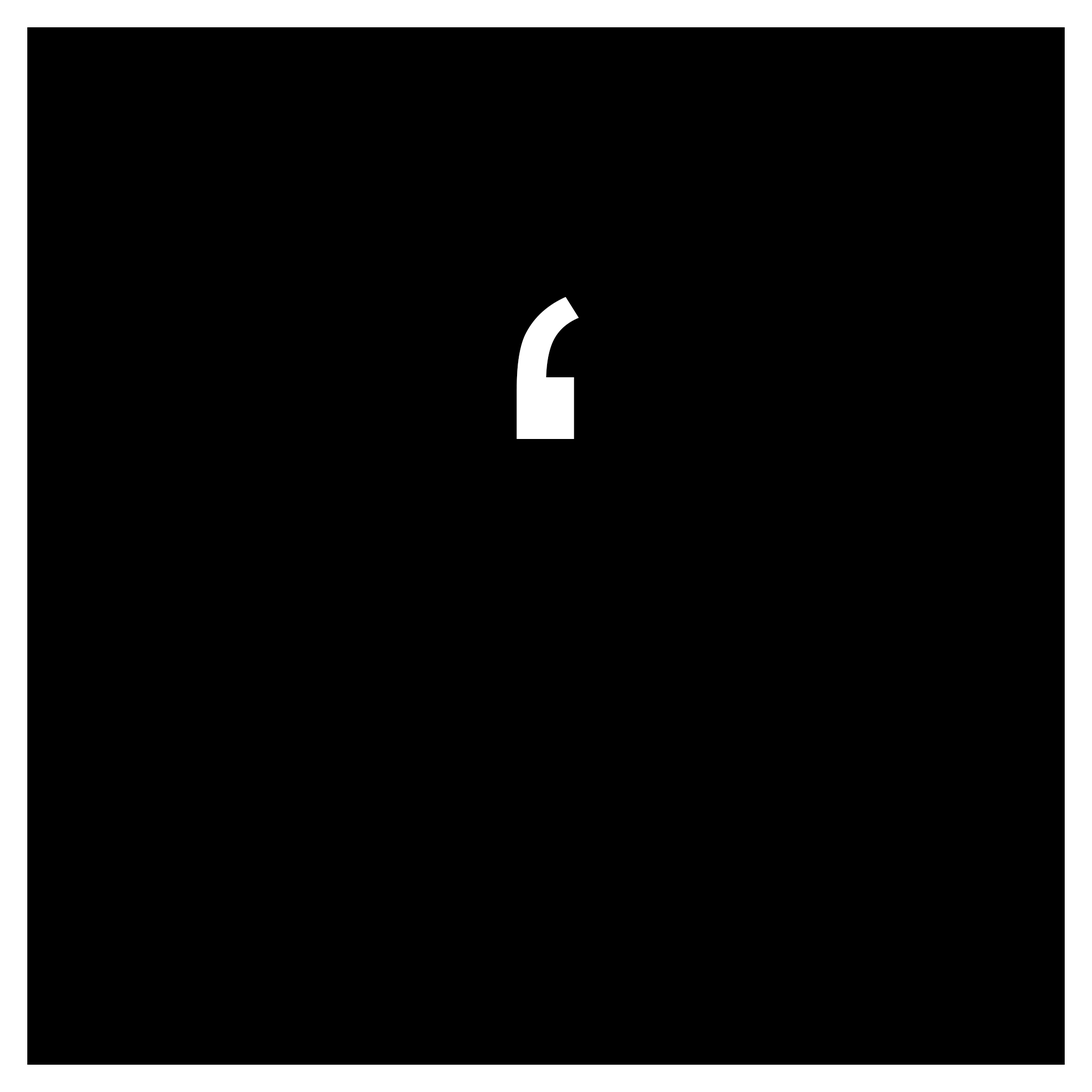
<style>
.page{position:relative;width:1092px;height:1092px;background:#000000}
.page>*{position:absolute;margin:0}
.t1{font:606.7px "ArialMT";color:#ffffff}
</style>
<div class="page">
<p class="t1" style="left:517px;top:297px;width:62px;height:142px">‘</p>
</div>
